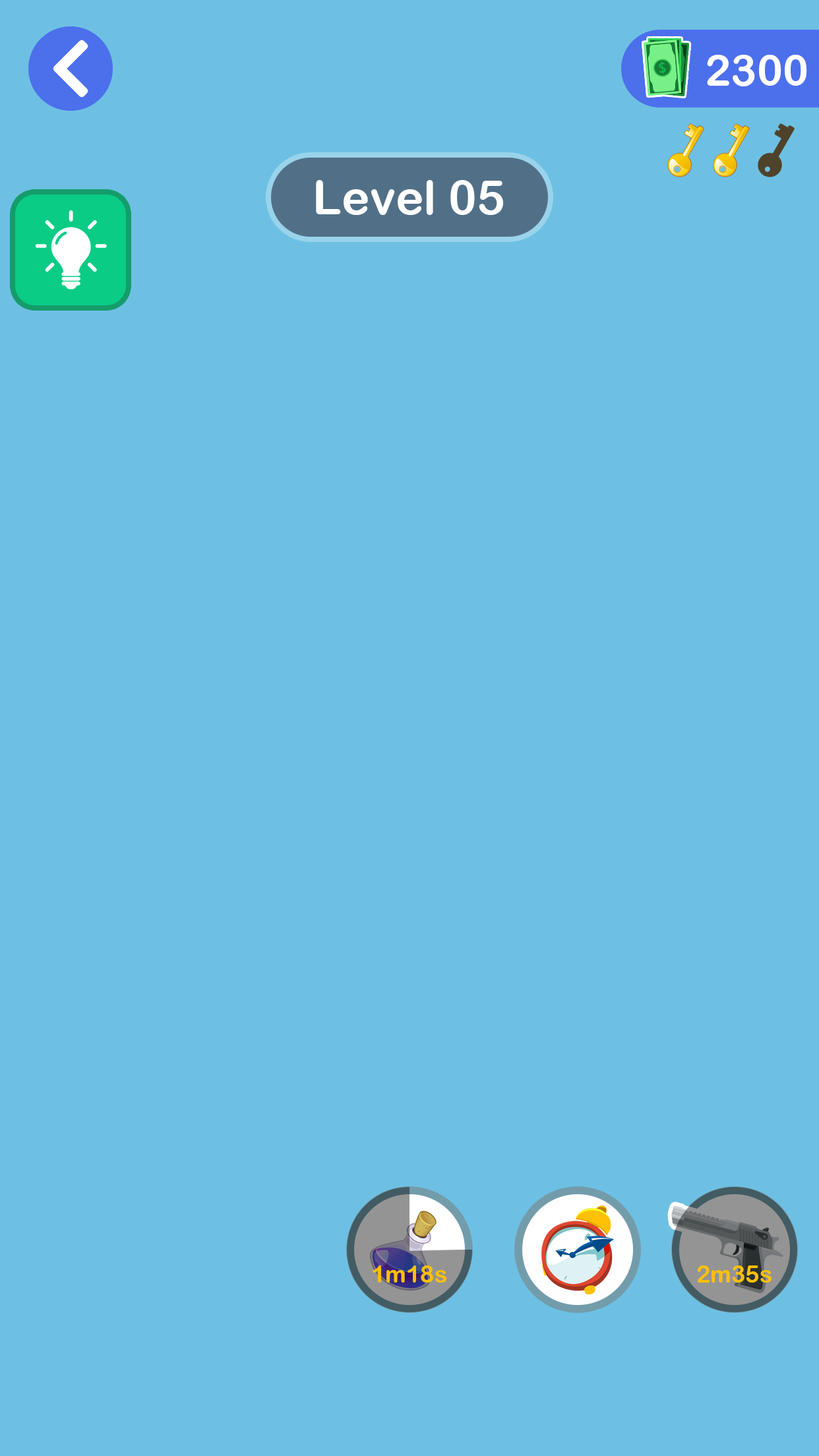
<style>
.page{position:relative;width:819px;height:1456px;background:#6dc0e3}
.page>*{position:absolute;margin:0}
.t1{font:43.5px "ArialRoundedMTBold";color:#ffffff}
.t2{font:47.5px "ArialRoundedMTBold";color:#ffffff}
.t3{font:23.7px "ArialRoundedMTBold";color:#ffc000}
</style>
<div class="page">
<p class="t1" style="left:707px;top:55px;width:100px;height:31px">2300</p>
<p class="t2" style="left:316px;top:180px;width:187px;height:35px">Level 05</p>
<p class="t3" style="left:373px;top:1265px;width:73px;height:18px">1m18s</p>
<p class="t3" style="left:698px;top:1265px;width:74px;height:18px">2m35s</p>
</div>
